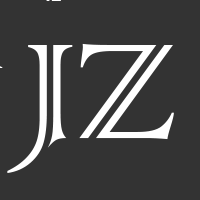
<style>
.page{position:relative;width:200px;height:200px;background:#333333}
.page>*{position:absolute;margin:0}
.t1{font:179.7px "ColonnaMT";color:#ffffff}
</style>
<div class="page">
<p class="t1" style="left:7px;top:43px;width:167px;height:130px">JZ</p>
</div>
